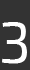
<style>
.page{position:relative;width:30px;height:70px;background:#333333}
.page>*{position:absolute;margin:0}
.t1{font:57px "Exo2-Regular";color:#ffffff}
</style>
<div class="page">
<p class="t1" style="left:2px;top:22px;width:25px;height:42px">3</p>
</div>
